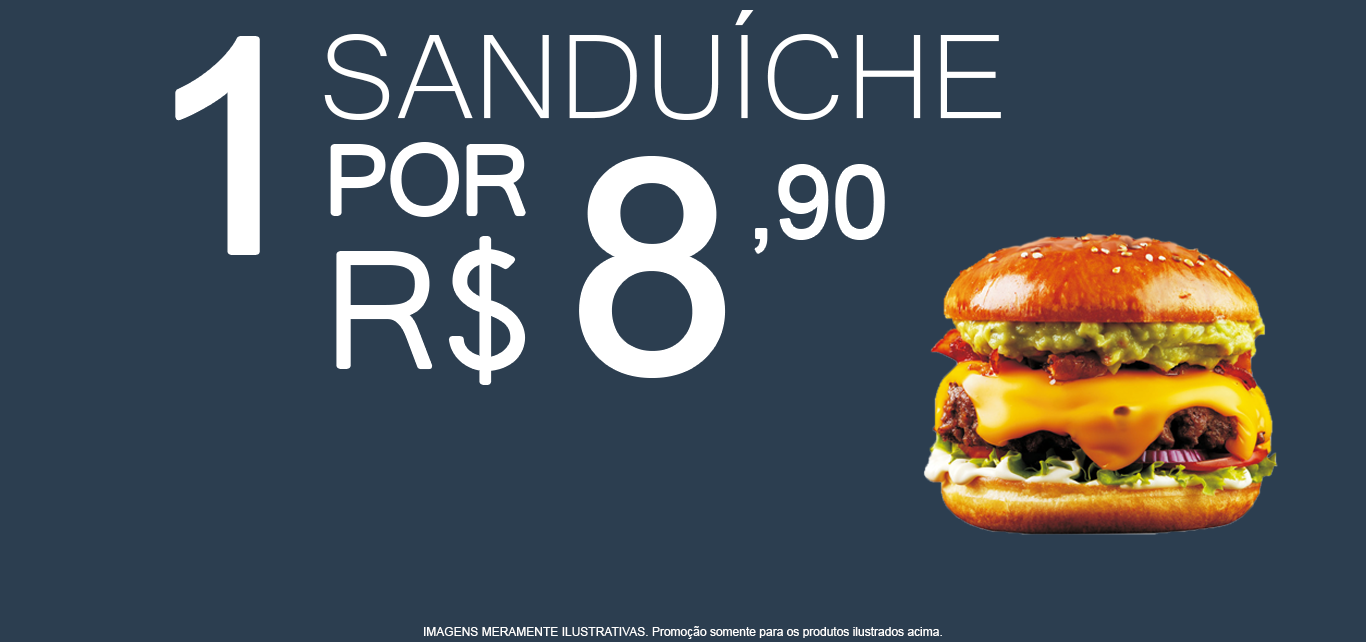
<style>
.page{position:relative;width:1366px;height:642px;background:#2c3e50}
.page>*{position:absolute;margin:0}
.t1{font:154.6px "Microsoft-Yi-Baiti";color:#ffffff}
.t2{font:296.6px "ArialMT";color:#ffffff}
.t3{font:123.6px "Microsoft-Yi-Baiti";color:#ffffff}
.t4{font:102.3px "ArialMT";color:#ffffff}
.t5{font:208.8px "Microsoft-Yi-Baiti";color:#ffffff}
.t6{font:12px "ArialMT";color:#ffffff}
</style>
<div class="page">
<p class="t1" style="left:324px;top:10px;width:677px;height:110px">SANDUÍCHE</p>
<p class="t2" style="left:178px;top:39px;width:79px;height:213px">1</p>
<p class="t3" style="left:333px;top:145px;width:190px;height:69px">POR</p>
<p class="t2" style="left:582px;top:159px;width:141px;height:216px">8</p>
<p class="t4" style="left:755px;top:165px;width:129px;height:88px">,90</p>
<p class="t5" style="left:339px;top:239px;width:184px;height:143px">R$</p>
<p class="t6" style="left:424px;top:626px;width:518px;height:13px">IMAGENS MERAMENTE ILUSTRATIVAS. Promoção somente para os produtos ilustrados acima.</p>
</div>
